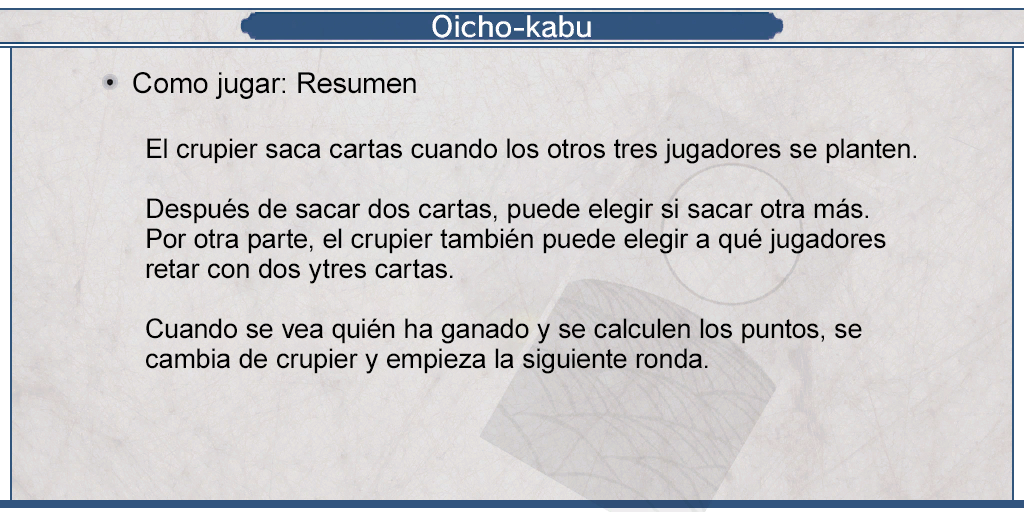
<style>
.page{position:relative;width:1024px;height:512px}
.page>*{position:absolute;margin:0}
.t1{font:29px "ArialMT";color:#000000}
.t2{font:27px/30px "ArialMT";color:#000000}
</style>
<div class="page">
<p class="t1" style="left:133px;top:72px;width:283px;height:27px">Como jugar: Resumen</p>
<p class="t2" style="left:146px;top:138px;width:770px;height:236px">El crupier saca cartas cuando los otros tres jugadores se planten.<br><br>Después de sacar dos cartas, puede elegir si sacar otra más. <br>Por otra parte, el crupier también puede elegir a qué jugadores <br>retar con dos ytres cartas.<br><br>Cuando se vea quién ha ganado y se calculen los puntos, se <br>cambia de crupier y empieza la siguiente ronda.</p>
</div>
